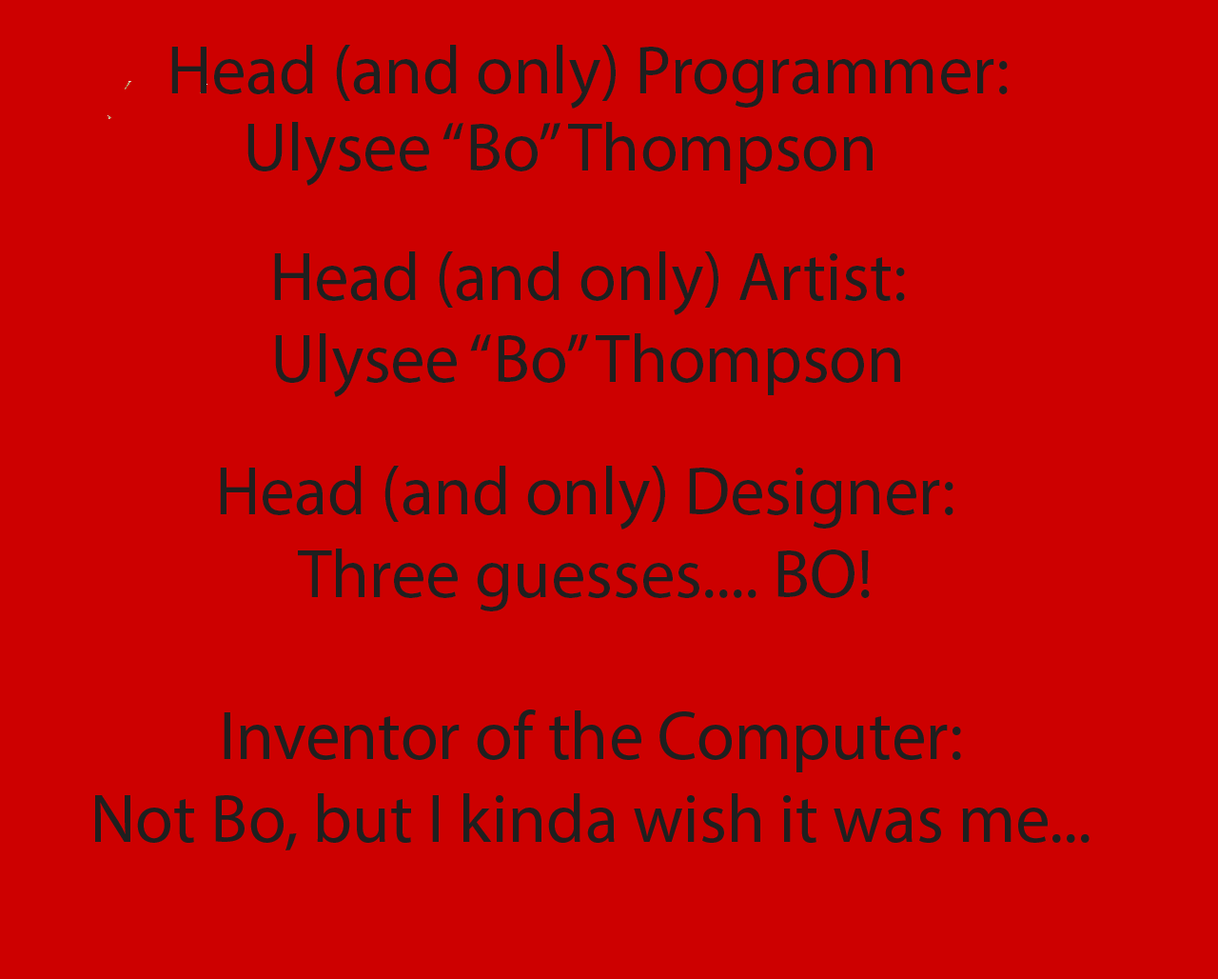
<style>
.page{position:relative;width:1218px;height:979px;background:#cd0000}
.page>*{position:absolute;margin:0}
.t1{font:68.8px "MyriadPro-Regular";color:#1f1f1f}
</style>
<div class="page">
<p class="t1" style="left:171px;top:45px;width:837px;height:64px">Head (and only) Programmer:</p>
<p class="t1" style="left:248px;top:122px;width:625px;height:64px">Ulysee “Bo” Thompson</p>
<p class="t1" style="left:274px;top:251px;width:631px;height:146px;text-align:center">Head (and only) Artist:<br>Ulysee “Bo” Thompson</p>
<p class="t1" style="left:220px;top:466px;width:734px;height:145px;text-align:center">Head (and only) Designer:<br>Three guesses.... BO!</p>
</div>
